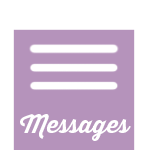
<style>
.page{position:relative;width:150px;height:150px;background:#b593bb}
.page>*{position:absolute;margin:0}
.t1{font:25px "ThirstyScript-Bold";color:#ffffff}
</style>
<div class="page">
<p class="t1" style="left:20px;top:114px;width:111px;height:27px">Messages</p>
</div>
